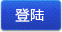
<style>
.page{position:relative;width:62px;height:32px}
.page>*{position:absolute;margin:0}
.t1{font:14px "MicrosoftYaHei";letter-spacing:0.025em;color:#ffffff}
</style>
<div class="page">
<p class="t1" style="left:15px;top:8px;width:29px;height:14px">登陆</p>
</div>
